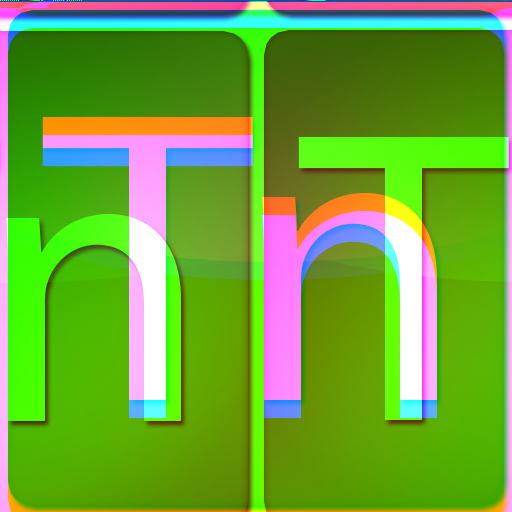
<style>
.page{position:relative;width:512px;height:512px}
.page>*{position:absolute;margin:0}
.t1{font:420px "MyriadPro-Regular"}
</style>
<div class="page">
<p class="t1" style="left:42px;top:115px;width:395px;height:283px">Tn</p>
</div>
